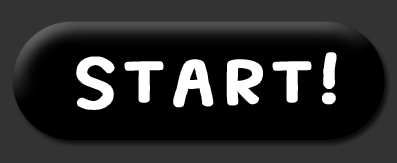
<style>
.page{position:relative;width:397px;height:163px;background:#000000}
.page>*{position:absolute;margin:0}
.t1{font:82.9px "Dgyoung";letter-spacing:0.075em;color:#ffffff;font-weight:bold}
</style>
<div class="page">
<p class="t1" style="left:77px;top:53px;width:259px;height:56px">START!</p>
</div>
